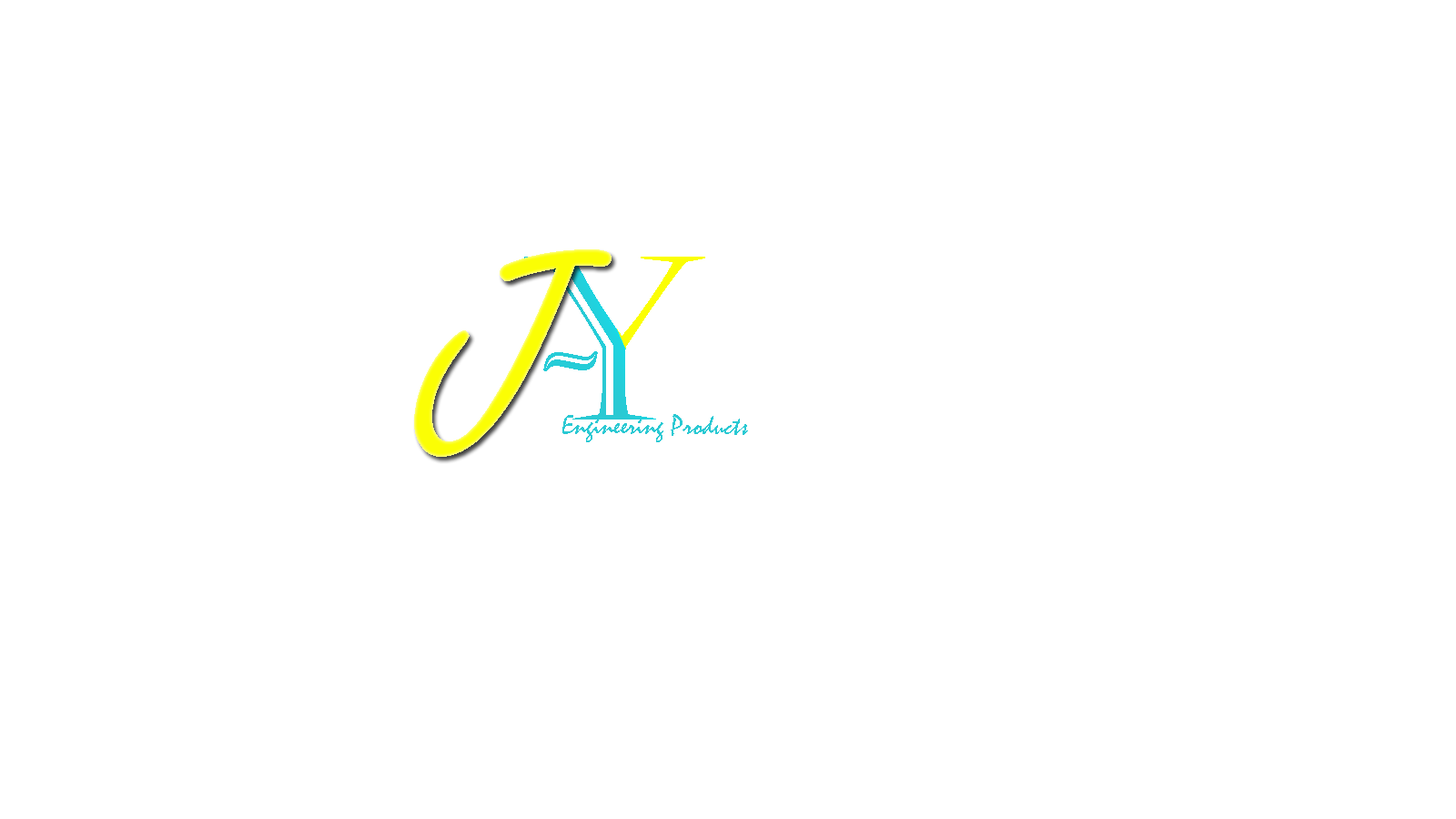
<style>
.page{position:relative;width:1456px;height:819px;background:#ffffff}
.page>*{position:absolute;margin:0}
.t1{font:318.5px "FreestyleScript-Regular";letter-spacing:0.005em}
.t2{font:227.5px "Castellar";letter-spacing:0.005em}
.t3{font:227.5px "NiagaraEngraved-Reg";letter-spacing:0.005em;color:#26ccd7}
.t4{font:27.3px "Mistral";letter-spacing:0.005em;color:#2ac9d3}
</style>
<div class="page">
<p class="t1" style="left:414px;top:249px;width:198px;height:208px">J</p>
<p class="t2" style="left:524px;top:257px;width:181px;height:163px">Y</p>
<p class="t3" style="left:543px;top:351px;width:55px;height:20px">~</p>
<p class="t4" style="left:562px;top:414px;width:186px;height:28px">Engineering Products</p>
</div>
